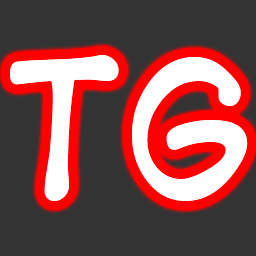
<style>
.page{position:relative;width:256px;height:256px;background:#333333}
.page>*{position:absolute;margin:0}
.t1{font:183px "DigitalStripCyrillic";color:#ffffff;text-transform:uppercase}
</style>
<div class="page">
<p class="t1" style="left:10px;top:55px;width:238px;height:146px">tg</p>
</div>
